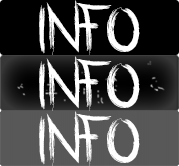
<style>
.page{position:relative;width:179px;height:166px;background:#000000}
.page>*{position:absolute;margin:0}
.t1{font:94.4px "Rasterized-Regular";color:#ffffff}
</style>
<div class="page">
<p class="t1" style="left:39px;top:0px;width:101px;height:55px">INFO</p>
<p class="t1" style="left:39px;top:56px;width:101px;height:55px">INFo</p>
<p class="t1" style="left:39px;top:111px;width:101px;height:55px">INFo</p>
</div>
